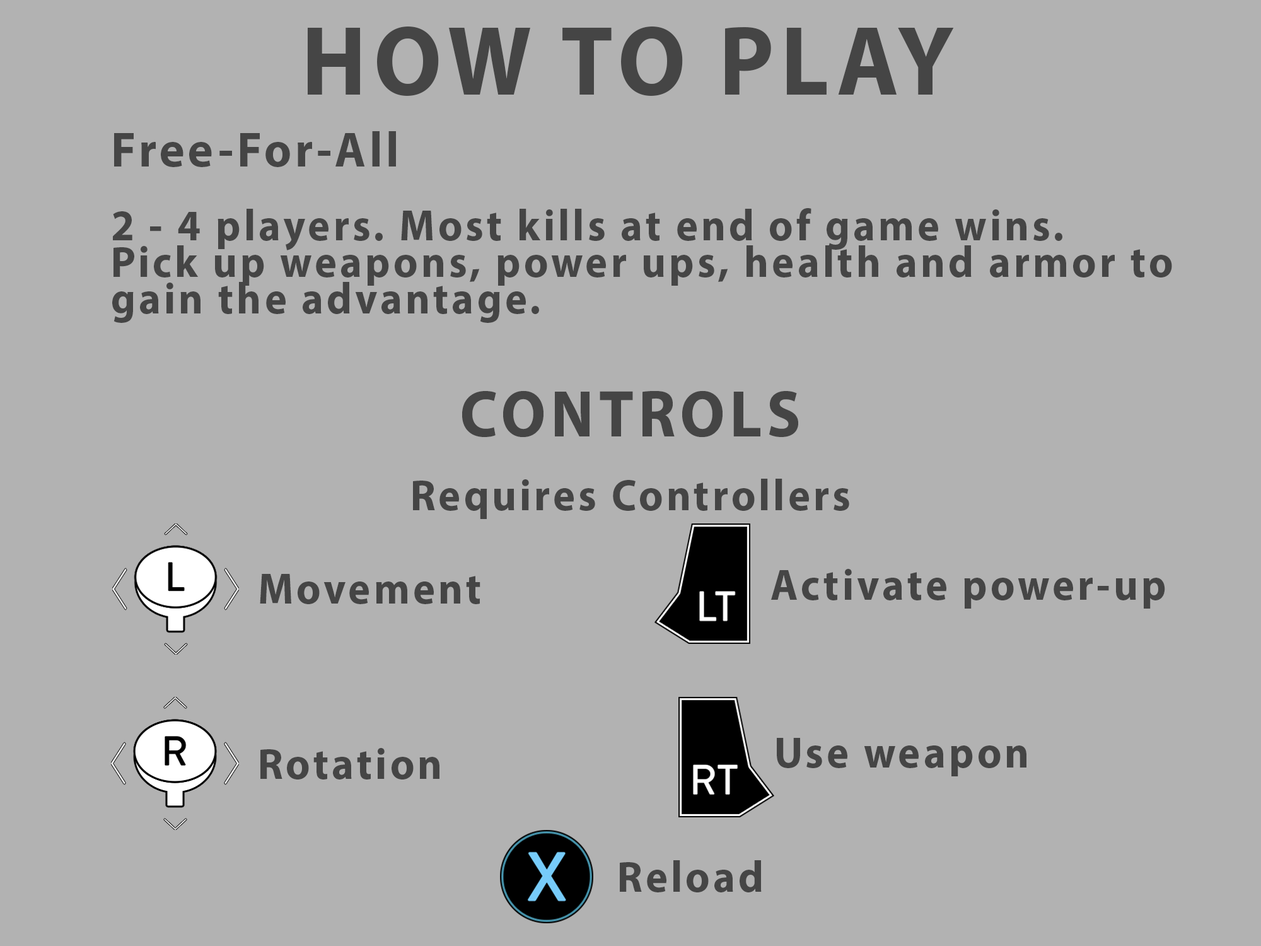
<style>
.page{position:relative;width:1261px;height:946px;background:#b2b2b2}
.page>*{position:absolute;margin:0}
.t1{font:99.3px "MyriadPro-Bold";letter-spacing:0.075em;color:#454545;scale:0.95 1}
.t2{font:44.1px/36.8px "MyriadPro-Bold";letter-spacing:0.075em;color:#454545;scale:0.95 1}
.t3{font:49.6px/36.8px "MyriadPro-Bold";letter-spacing:0.075em;color:#454545;scale:0.95 1}
.t4{font:66.2px/36.8px "MyriadPro-Bold";letter-spacing:0.075em;color:#454545;scale:0.95 1}
.t5{font:44.1px "MyriadPro-Bold";letter-spacing:0.075em;color:#454545;scale:0.95 1}
</style>
<div class="page">
<p class="t1" style="left:308px;top:26px;width:646px;height:70px">HOW TO PLAY</p>
<p class="t2" style="left:112px;top:131px;width:1060px;height:192px"><span class="t3">Free-For-All<br></span><br>2 - 4 players. Most kills at end of game wins.<br>Pick up weapons, power ups, health and armor to<br>gain the advantage.</p>
<p class="t2" style="left:413px;top:390px;width:436px;height:129px;text-align:center"><span class="t4">CONTROLS<br><br></span>Requires Controllers</p>
<p class="t5" style="left:771px;top:569px;width:394px;height:39px">Activate power-up</p>
<p class="t5" style="left:260px;top:574px;width:220px;height:30px">Movement</p>
<p class="t5" style="left:777px;top:738px;width:249px;height:38px">Use weapon</p>
<p class="t5" style="left:260px;top:748px;width:179px;height:31px">Rotation</p>
<p class="t5" style="left:620px;top:860px;width:142px;height:32px">Reload</p>
</div>
